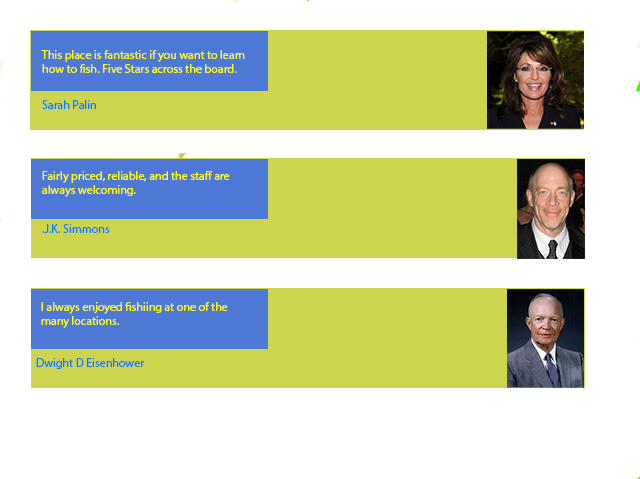
<style>
.page{position:relative;width:640px;height:479px;background:#ffffff}
.page>*{position:absolute;margin:0}
.t1{font:12px "MyriadPro-Regular";color:#fffc08}
.t2{font:12px "MyriadPro-Regular";color:#087cff}
</style>
<div class="page">
<p class="t1" style="left:41px;top:50px;width:204px;height:23px">This place is fantastic if you want to learn how to fish. Five Stars across the board.</p>
<p class="t2" style="left:42px;top:100px;width:54px;height:9px">Sarah Palin</p>
<p class="t1" style="left:42px;top:171px;width:188px;height:26px">Fairly priced, reliable, and the staff are always welcoming.</p>
<p class="t2" style="left:42px;top:224px;width:68px;height:9px">.J.K. Simmons</p>
<p class="t1" style="left:41px;top:302px;width:187px;height:26px">I always enjoyed fishiing at one of the many locations.</p>
<p class="t2" style="left:36px;top:358px;width:109px;height:11px">Dwight D Eisenhower</p>
</div>
